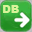
<style>
.page{position:relative;width:32px;height:32px}
.page>*{position:absolute;margin:0}
.t1{font:10.7px "Arial-Black";color:#d8f299}
</style>
<div class="page">
<p class="t1" style="left:3px;top:5px;width:16px;height:8px">DB</p>
</div>
